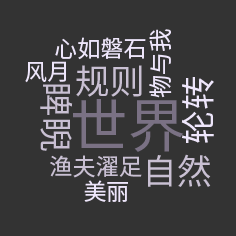
<style>
.page{position:relative;width:236px;height:236px;background:#333333}
.page>*{position:absolute;margin:0}
.t1{font:23.1px "SourceHanSansCN-Regular";color:#eee6fb}
.t2{font:34.7px "SourceHanSansCN-Regular";color:#c9c0d3}
.t3{font:34.7px "SourceHanSansCN-Regular";color:#eee6fb}
.t4{font:57.8px "SourceHanSansCN-Regular";color:#7a7184}
.t5{font:23.1px "SourceHanSansCN-Regular";color:#c9c0d3}
</style>
<div class="page">
<p class="t1" style="left:149px;top:29px;width:23px;height:69px;rotate:-90deg">物与我</p>
<p class="t1" style="left:55px;top:37px;width:91px;height:23px">心如磐石</p>
<p class="t1" style="left:25px;top:61px;width:41px;height:22px">风月</p>
<p class="t2" style="left:76px;top:65px;width:66px;height:32px">规则</p>
<p class="t3" style="left:181px;top:77px;width:33px;height:66px;rotate:-90deg">轮转</p>
<p class="t2" style="left:40px;top:84px;width:33px;height:67px;rotate:90deg">睥睨</p>
<p class="t4" style="left:73px;top:99px;width:111px;height:53px">世界</p>
<p class="t5" style="left:50px;top:155px;width:92px;height:23px">渔夫濯足</p>
<p class="t2" style="left:148px;top:154px;width:63px;height:33px">自然</p>
<p class="t1" style="left:84px;top:180px;width:44px;height:22px">美丽</p>
</div>
